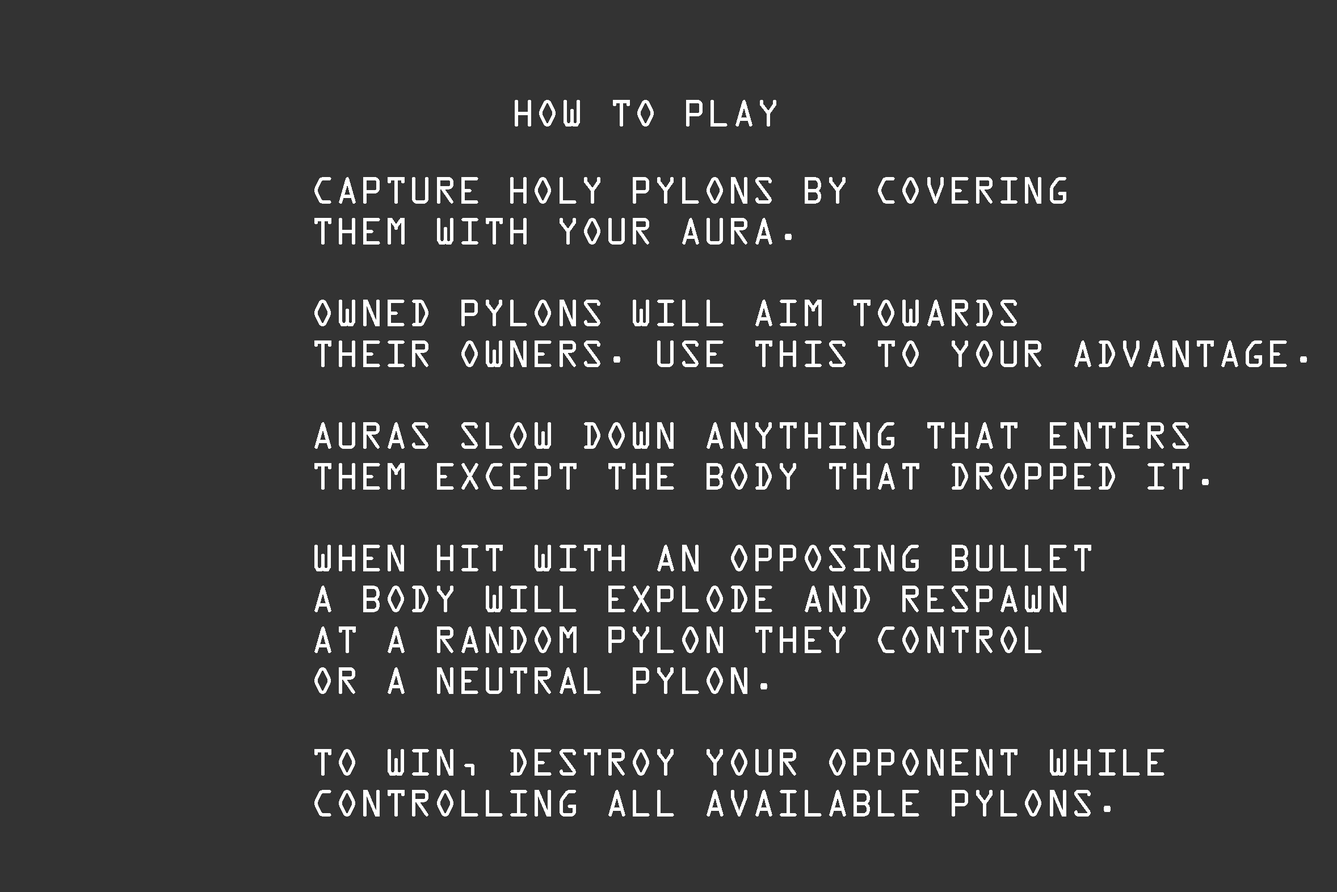
<style>
.page{position:relative;width:1337px;height:892px;background:#333333}
.page>*{position:absolute;margin:0}
.t1{font:34px "OCRAStd";color:#ffffff}
</style>
<div class="page">
<p class="t1" style="left:515px;top:100px;width:261px;height:27px">HOW TO PLAY</p>
<p class="t1" style="left:314px;top:177px;width:993px;height:640px">CAPTURE HOLY PYLONS BY COVERING<br>THEM WITH YOUR AURA.<br><br>OWNED PYLONS WILL AIM TOWARDS<br>THEIR OWNERS. USE THIS TO YOUR ADVANTAGE.<br><br>AURAS SLOW DOWN ANYTHING THAT ENTERS<br>THEM EXCEPT THE BODY THAT DROPPED IT.<br><br>WHEN HIT WITH AN OPPOSING BULLET<br>A BODY WILL EXPLODE AND RESPAWN<br>AT A RANDOM PYLON THEY CONTROL<br>OR A NEUTRAL PYLON.<br><br>TO WIN, DESTROY YOUR OPPONENT WHILE<br>CONTROLLING ALL AVAILABLE PYLONS.</p>
</div>
